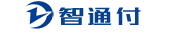
<style>
.page{position:relative;width:195px;height:32px;background:#ffffff}
.page>*{position:absolute;margin:0}
.t1{font:28px "zcool-gdh";color:#06428e;font-weight:bold}
.t2{font:36px "Ìõ·ùºÚÌå";color:#f9f604;font-weight:bold}
</style>
<div class="page">
<p class="t1" style="left:59px;top:7px;width:82px;height:18px"><span class="t2"> </span>智通付</p>
</div>
